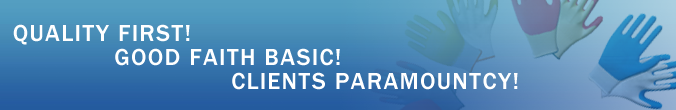
<style>
.page{position:relative;width:676px;height:110px}
.page>*{position:absolute;margin:0}
.t1{font:24px/24px "FranklinGothic-Medium";letter-spacing:0.075em;color:#ffffff}
</style>
<div class="page">
<p class="t1" style="left:13px;top:24px;width:505px;height:66px">QUALITY FIRST! <br>             GOOD FAITH BASIC!<br>                            CLIENTS PARAMOUNTCY!</p>
</div>
